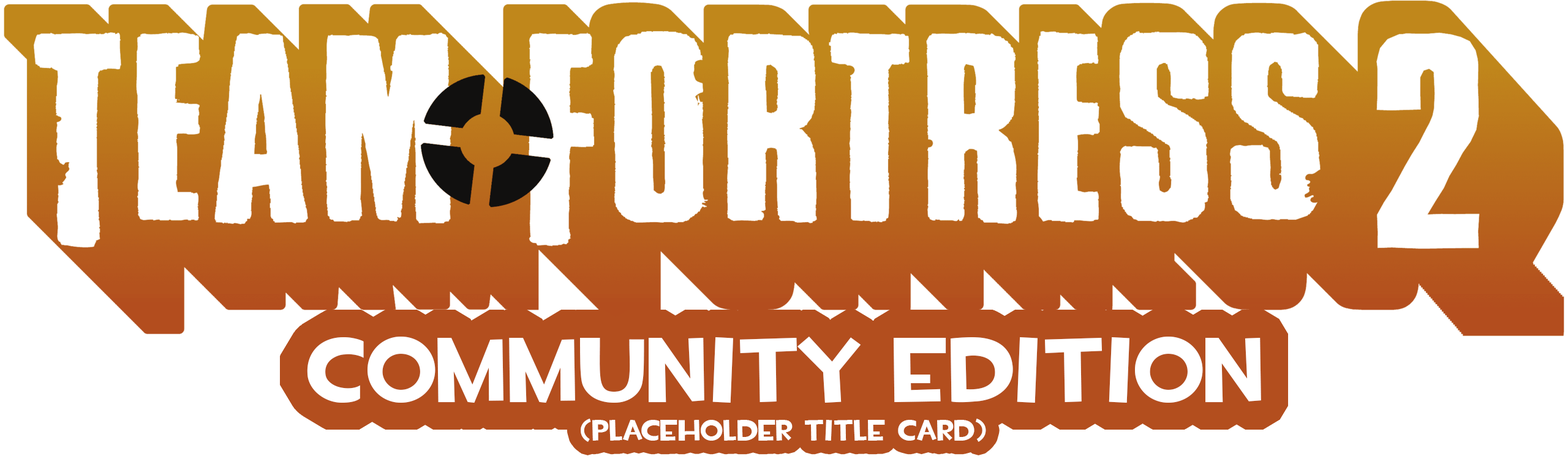
<style>
.page{position:relative;width:1568px;height:459px;background:#ffffff}
.page>*{position:absolute;margin:0}
.t1{font:91.9px "TF2Build";color:#ffffff}
.t2{font:29.4px "TF2Build";color:#ffffff}
</style>
<div class="page">
<p class="t1" style="left:307px;top:337px;width:954px;height:66px">Community Edition</p>
<p class="t2" style="left:581px;top:419px;width:405px;height:23px">(Placeholder Title Card)</p>
</div>
